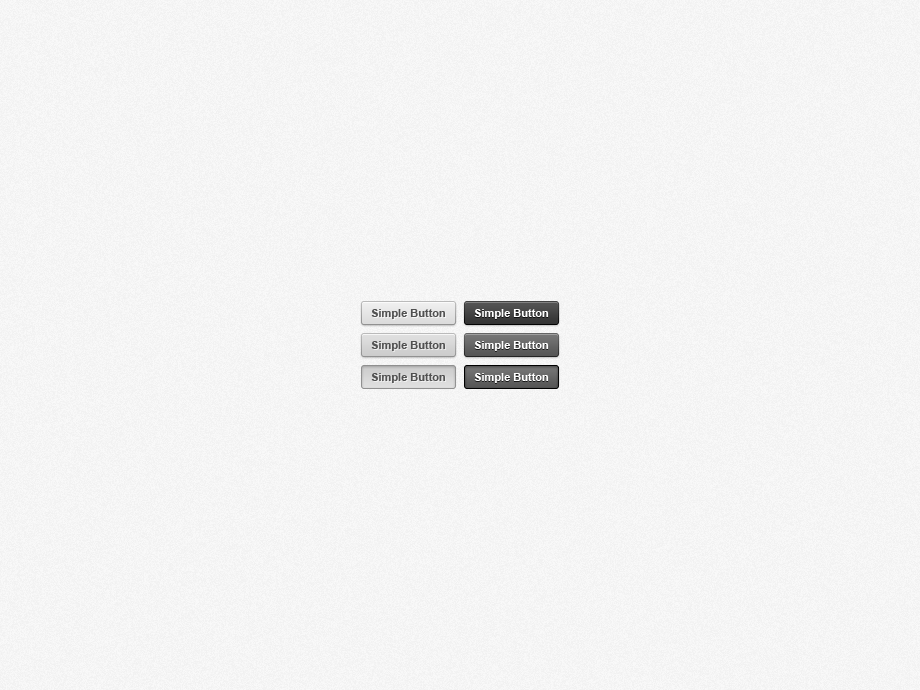
<style>
.page{position:relative;width:920px;height:690px}
.page>*{position:absolute;margin:0}
.t1{font:11px "Arial-BoldMT";color:#555555}
.t2{font:11px "Arial-BoldMT";color:#ffffff}
</style>
<div class="page">
<p class="t1" style="left:371px;top:309px;width:75px;height:10px">Simple Button</p>
<p class="t2" style="left:474px;top:309px;width:75px;height:10px">Simple Button</p>
<p class="t1" style="left:371px;top:341px;width:75px;height:10px">Simple Button</p>
<p class="t2" style="left:474px;top:341px;width:75px;height:10px">Simple Button</p>
<p class="t1" style="left:371px;top:373px;width:75px;height:10px">Simple Button</p>
<p class="t2" style="left:474px;top:373px;width:75px;height:10px">Simple Button</p>
</div>
